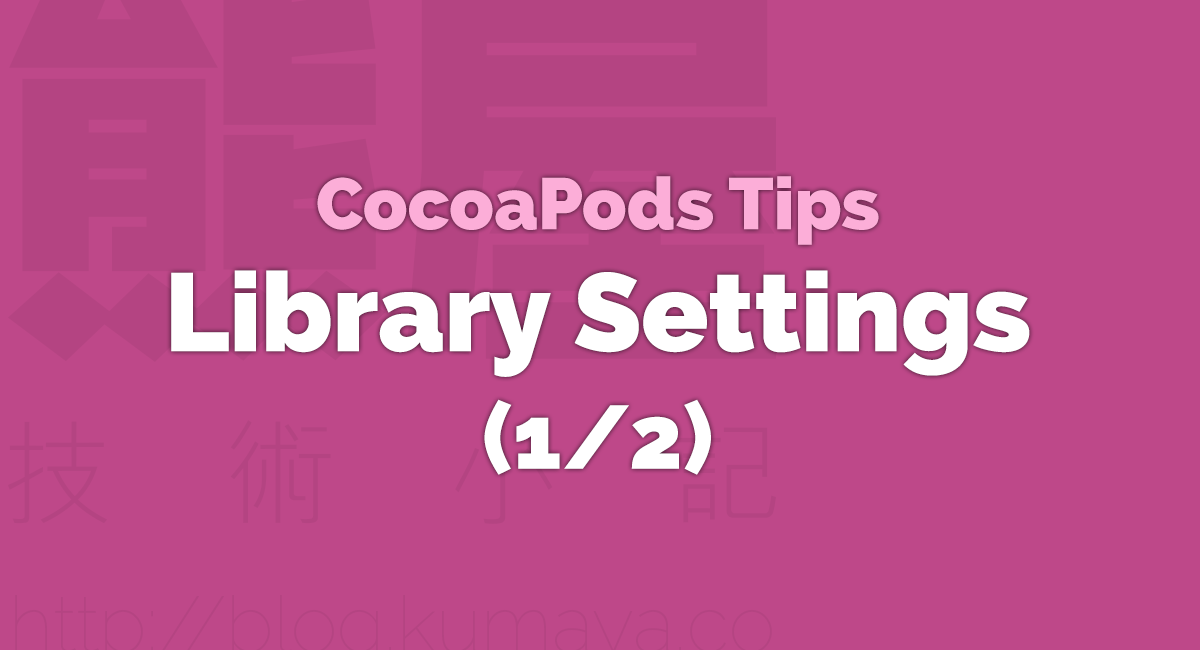
<style>
.page{position:relative;width:1200px;height:650px;background:#be4889}
.page>*{position:absolute;margin:0}
.t1{font:110.2px/121.9px "Raleway-Heavy";color:#ffffff}
.t2{font:72.7px/84.4px "Raleway-Heavy";color:#fcaed8}
.t3{font:89.3px/117.7px "Raleway-Heavy";color:#ffffff}
</style>
<div class="page">
<p class="t1" style="left:171px;top:176px;width:859px;height:299px;text-align:center"><span class="t2">CocoaPods Tips<br></span>Library Settings<br><span class="t3">(1/2)</span></p>
</div>
